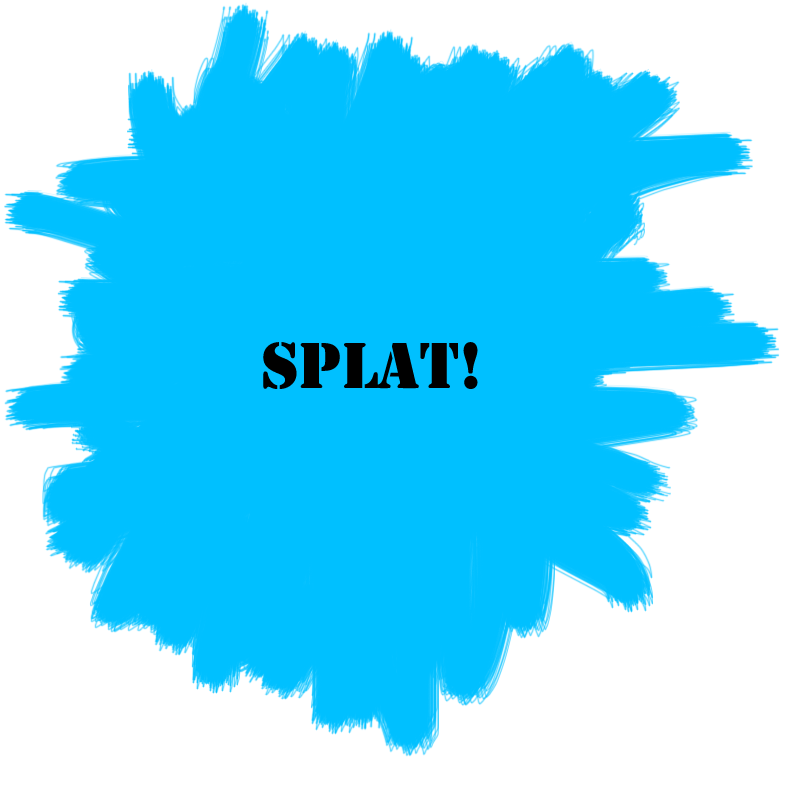
<style>
.page{position:relative;width:800px;height:800px;background:#00c0ff}
.page>*{position:absolute;margin:0}
.t1{font:60px "StencilStd";color:#000000}
</style>
<div class="page">
<p class="t1" style="left:263px;top:342px;width:215px;height:47px">SPLAT!</p>
</div>
